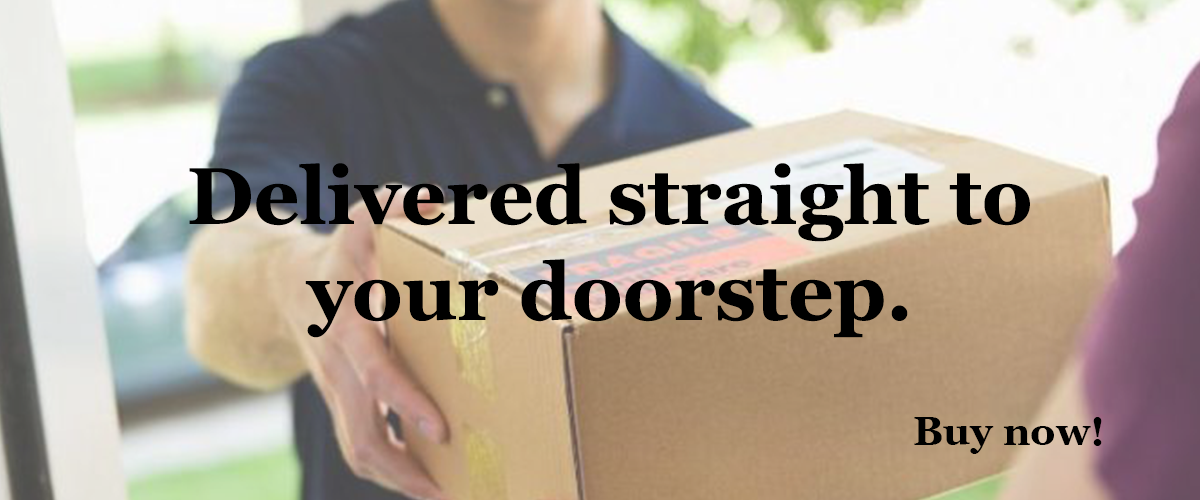
<style>
.page{position:relative;width:1200px;height:500px}
.page>*{position:absolute;margin:0}
.t1{font:80px "Vani-Bold";color:#000000}
.t2{font:40px "Vani-Bold";color:#000000}
</style>
<div class="page">
<p class="t1" style="left:189px;top:163px;width:841px;height:175px;text-align:center">Delivered straight to your doorstep.</p>
<p class="t2" style="left:914px;top:417px;width:188px;height:37px">Buy now!</p>
</div>
